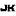
<style>
.page{position:relative;width:16px;height:16px;background:#ffffff}
.page>*{position:absolute;margin:0}
.t1{font:10px "SaucerBB";color:#000000}
</style>
<div class="page">
<p class="t1" style="left:0px;top:4px;width:16px;height:9px">JK</p>
</div>
